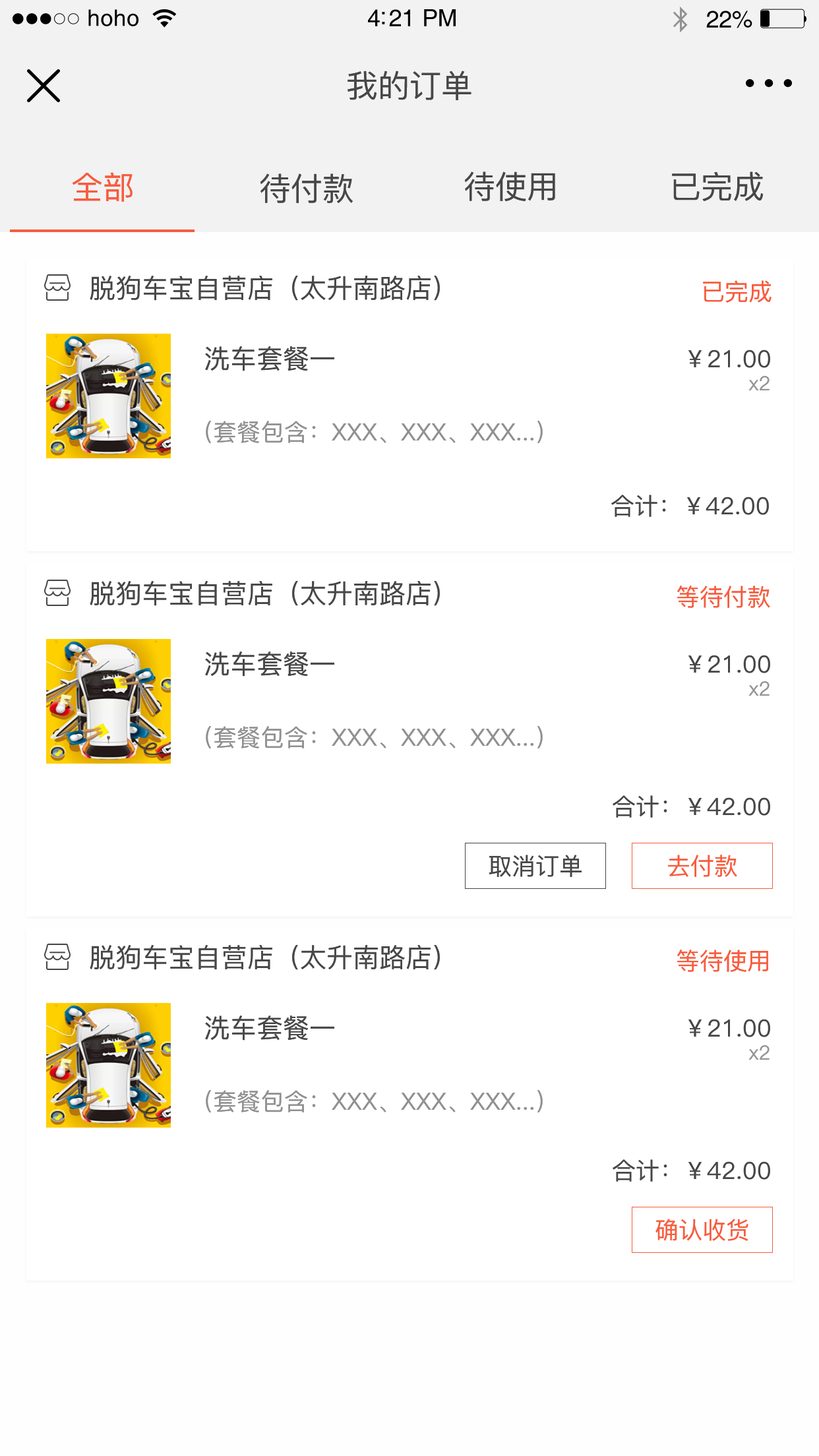
<style>
.page{position:relative;width:819px;height:1456px;background:#ffffff}
.page>*{position:absolute;margin:0}
.t1{font:22.8px "Helvetica";letter-spacing:0.02em;color:#000000}
.t2{font:23.8px "Helvetica";letter-spacing:-0.02em;color:#000000}
.t3{font:31.7px "PingFang-SC-Medium";color:#474747}
.t4{font:31.7px "PingFang-SC-Medium";color:#f75c3e}
.t5{font:26.4px "PingFang-SC-Medium";color:#474747}
.t6{font:23.7px "PingFang-SC-Medium";color:#f75c3e}
.t7{font:23.7px "PingFang-SC-Medium";color:#474747}
.t8{font:19.8px "PingFang-SC-Medium";color:#959595}
.t9{font:23.7px "PingFang-SC-Medium";color:#909090}
</style>
<div class="page">
<p class="t1" style="left:88px;top:9px;width:50px;height:17px">hoho</p>
<p class="t2" style="left:368px;top:9px;width:88px;height:17px">4:21 PM</p>
<p class="t2" style="left:706px;top:11px;width:46px;height:17px">22%</p>
<p class="t3" style="left:348px;top:71px;width:123px;height:29px">我的订单</p>
<p class="t4" style="left:72px;top:172px;width:61px;height:30px">全部</p>
<p class="t3" style="left:260px;top:173px;width:93px;height:30px">待付款</p>
<p class="t3" style="left:464px;top:171px;width:91px;height:30px">待使用</p>
<p class="t3" style="left:672px;top:171px;width:92px;height:30px">已完成</p>
<p class="t5" style="left:90px;top:276px;width:350px;height:25px">脱狗车宝自营店（太升南路店）</p>
<p class="t6" style="left:703px;top:280px;width:69px;height:23px">已完成</p>
<p class="t5" style="left:205px;top:346px;width:129px;height:25px">洗车套餐一</p>
<p class="t7" style="left:688px;top:349px;width:82px;height:19px">￥21.00</p>
<p class="t8" style="left:748px;top:376px;width:22px;height:14px">x2</p>
<p class="t9" style="left:206px;top:421px;width:337px;height:22px">（套餐包含：XXX、XXX、XXX...）</p>
<p class="t7" style="left:611px;top:495px;width:158px;height:22px">合计：￥42.00</p>
<p class="t5" style="left:90px;top:581px;width:350px;height:25px">脱狗车宝自营店（太升南路店）</p>
<p class="t6" style="left:677px;top:586px;width:93px;height:22px">等待付款</p>
<p class="t5" style="left:205px;top:651px;width:129px;height:26px">洗车套餐一</p>
<p class="t7" style="left:688px;top:655px;width:82px;height:18px">￥21.00</p>
<p class="t8" style="left:748px;top:681px;width:22px;height:15px">x2</p>
<p class="t9" style="left:206px;top:726px;width:337px;height:22px">（套餐包含：XXX、XXX、XXX...）</p>
<p class="t7" style="left:613px;top:795px;width:157px;height:23px">合计：￥42.00</p>
<p class="t7" style="left:489px;top:855px;width:93px;height:22px">取消订单</p>
<p class="t6" style="left:668px;top:855px;width:69px;height:22px">去付款</p>
<p class="t5" style="left:90px;top:945px;width:350px;height:25px">脱狗车宝自营店（太升南路店）</p>
<p class="t6" style="left:677px;top:950px;width:91px;height:22px">等待使用</p>
<p class="t5" style="left:205px;top:1015px;width:129px;height:26px">洗车套餐一</p>
<p class="t7" style="left:688px;top:1019px;width:82px;height:18px">￥21.00</p>
<p class="t8" style="left:748px;top:1045px;width:22px;height:15px">x2</p>
<p class="t9" style="left:206px;top:1090px;width:337px;height:22px">（套餐包含：XXX、XXX、XXX...）</p>
<p class="t7" style="left:613px;top:1159px;width:157px;height:23px">合计：￥42.00</p>
<p class="t6" style="left:655px;top:1219px;width:93px;height:22px">确认收货</p>
</div>
